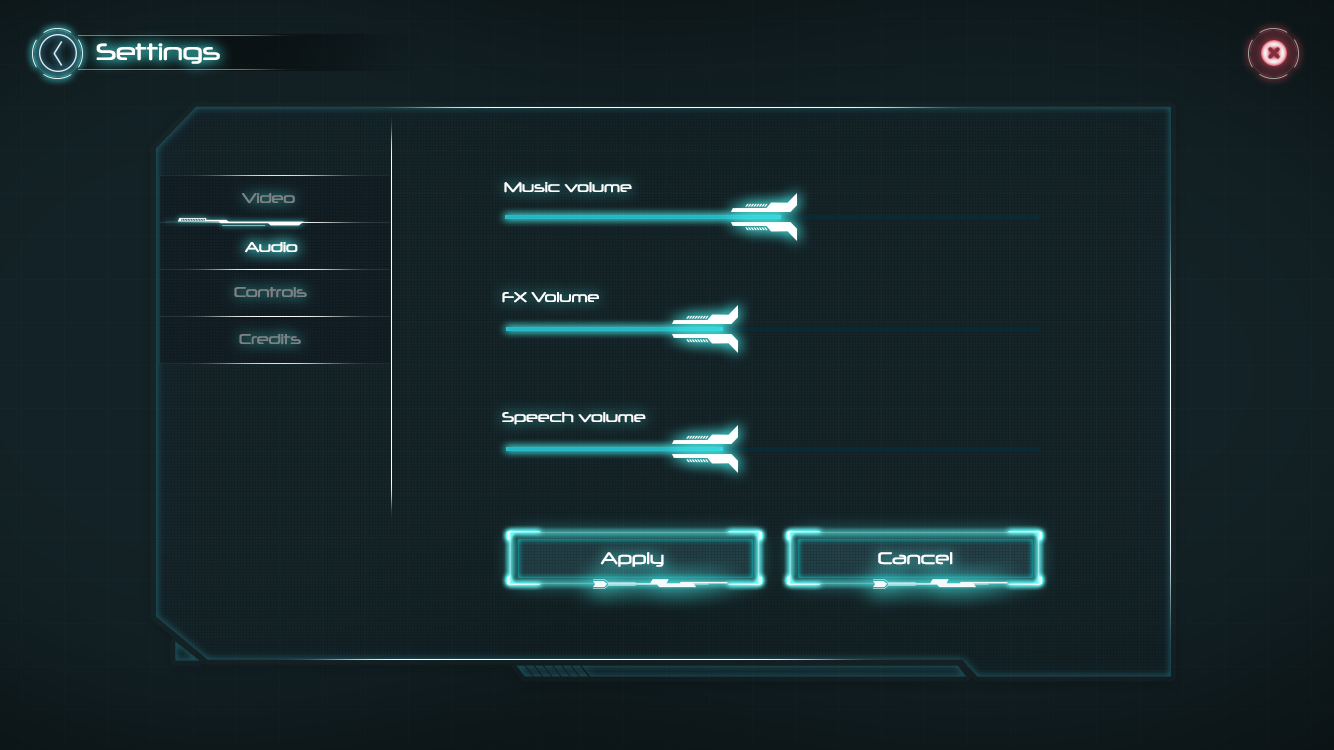
<style>
.page{position:relative;width:1334px;height:750px}
.page>*{position:absolute;margin:0}
.t1{font:22.6px "Neuropol-Regular";color:#ffffff}
.t2{font:13.6px "Neuropol-Regular";color:#ffffff}
.t3{font:13.6px "Neuropol-Regular";color:#7e8183}
.t4{font:13.6px "Neuropol-Regular";color:#7f8284}
.t5{font:16.2px "Neuropol-Regular";color:#ffffff}
</style>
<div class="page">
<p class="t1" style="left:96px;top:43px;width:124px;height:21px">Settings</p>
<p class="t2" style="left:504px;top:182px;width:128px;height:11px">Music volume</p>
<p class="t3" style="left:242px;top:193px;width:53px;height:11px">Video</p>
<p class="t2" style="left:245px;top:242px;width:53px;height:11px">Audio</p>
<p class="t4" style="left:234px;top:287px;width:73px;height:11px">Controls</p>
<p class="t2" style="left:502px;top:292px;width:97px;height:11px">FX Volume</p>
<p class="t4" style="left:239px;top:334px;width:62px;height:11px">Credits</p>
<p class="t2" style="left:502px;top:412px;width:144px;height:13px">Speech volume</p>
<p class="t5" style="left:600px;top:552px;width:64px;height:15px">Apply</p>
<p class="t5" style="left:878px;top:552px;width:75px;height:13px">Cancel</p>
</div>
